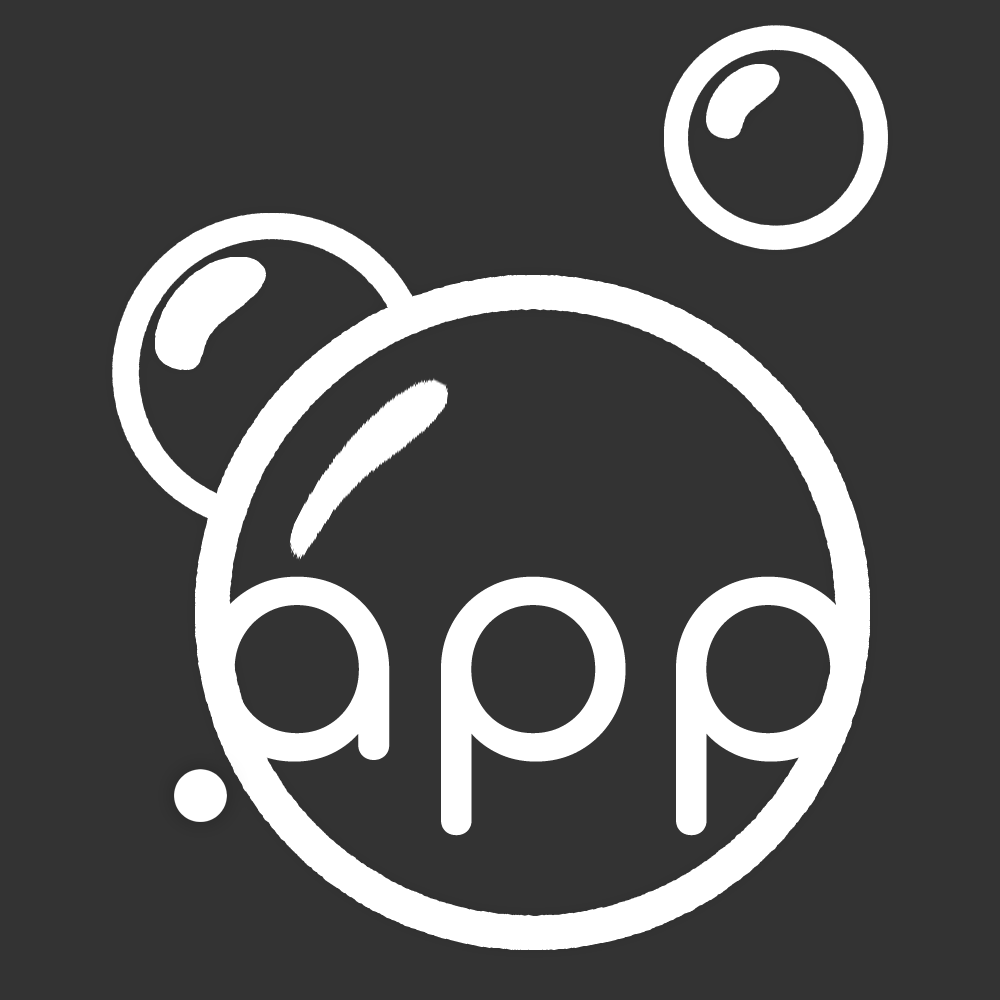
<style>
.page{position:relative;width:1000px;height:1000px;background:#333333}
.page>*{position:absolute;margin:0}
.t1{font:321.3px "Comfortaa-Regular";color:#ffffff;font-weight:bold}
</style>
<div class="page">
<p class="t1" style="left:204px;top:576px;width:657px;height:260px">app</p>
</div>
